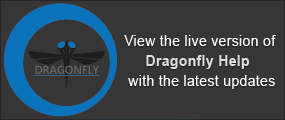
<style>
.page{position:relative;width:285px;height:120px;background:#363636}
.page>*{position:absolute;margin:0}
.t1{font:15.4px/20px "ArialMT";letter-spacing:0.025em;color:#ffffff;scale:0.91 1}
.t2{font:15.4px/20px "Arial-BoldMT";letter-spacing:0.025em;color:#dedede;scale:0.91 1}
</style>
<div class="page">
<p class="t1" style="left:124px;top:35px;width:152px;height:54px;text-align:center">View the live version of <span class="t2">Dragonfly Help<br></span>  with the latest updates</p>
</div>
